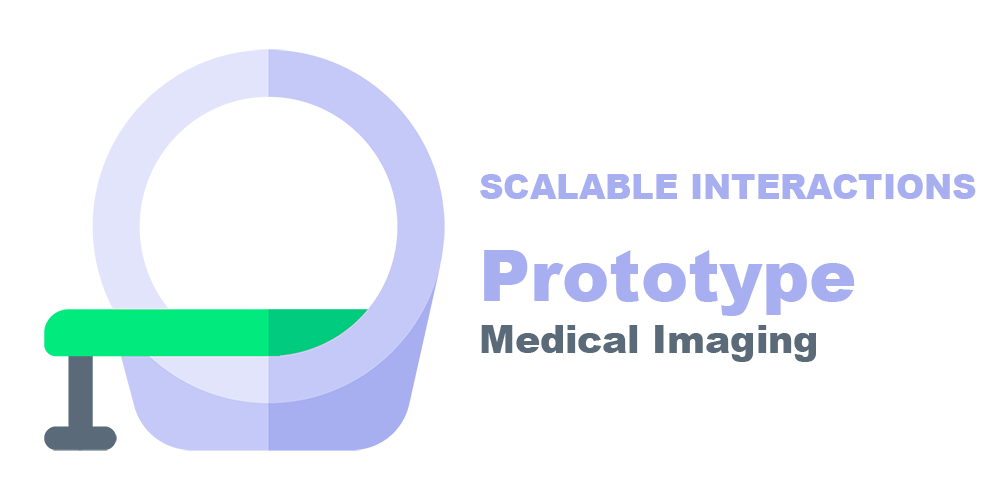
<style>
.page{position:relative;width:1000px;height:500px;background:#ffffff}
.page>*{position:absolute;margin:0}
.t1{font:33.9px "Arial-Black";color:#a8aff1}
.t2{font:70.5px "Arial-Black";color:#a8aff1}
.t3{font:37.6px "Arial-Black";color:#5a6a78}
</style>
<div class="page">
<p class="t1" style="left:480px;top:174px;width:496px;height:25px">SCALABLE INTERACTIONS</p>
<p class="t2" style="left:484px;top:250px;width:371px;height:66px">Prototype</p>
<p class="t3" style="left:481px;top:325px;width:335px;height:37px">Medical Imaging</p>
</div>
